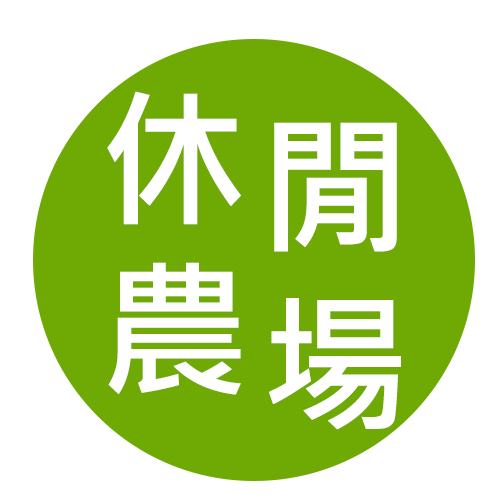
<style>
.page{position:relative;width:500px;height:500px;background:#ffffff}
.page>*{position:absolute;margin:0}
.t1{font:150px "MicrosoftJhengHeiBold";letter-spacing:0.2em;color:#ffffff}
</style>
<div class="page">
<p class="t1" style="left:107px;top:91px;width:134px;height:134px">休</p>
<p class="t1" style="left:274px;top:122px;width:123px;height:130px">閒</p>
<p class="t1" style="left:108px;top:262px;width:133px;height:133px">農</p>
<p class="t1" style="left:269px;top:298px;width:132px;height:132px">場</p>
</div>
